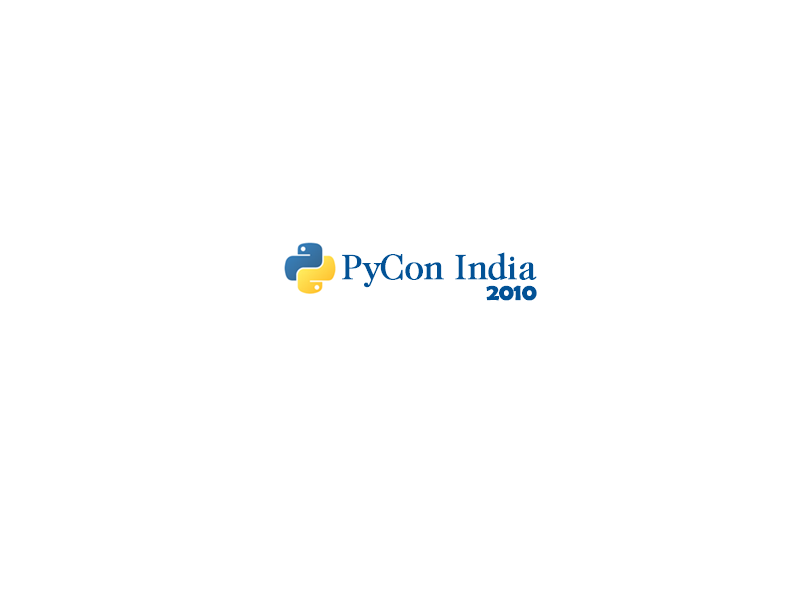
<style>
.page{position:relative;width:800px;height:600px;background:#ffffff}
.page>*{position:absolute;margin:0}
.t1{font:36px "Caslon224ITCbyBT-Book";letter-spacing:-0.025em;color:#025296;font-weight:bold}
.t2{font:24px "BerlinSansFBDemi-Bold";letter-spacing:-0.025em;color:#025296;font-weight:bold}
</style>
<div class="page">
<p class="t1" style="left:342px;top:252px;width:195px;height:36px">PyCon India</p>
<p class="t2" style="left:486px;top:285px;width:51px;height:16px">2010</p>
</div>
